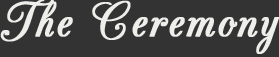
<style>
.page{position:relative;width:279px;height:57px;background:#333333}
.page>*{position:absolute;margin:0}
.t1{font:58.7px "CACChampagne";letter-spacing:0.025em;color:#eeeeeb;font-weight:bold}
</style>
<div class="page">
<p class="t1" style="left:0px;top:0px;width:279px;height:54px">The Ceremony</p>
</div>
